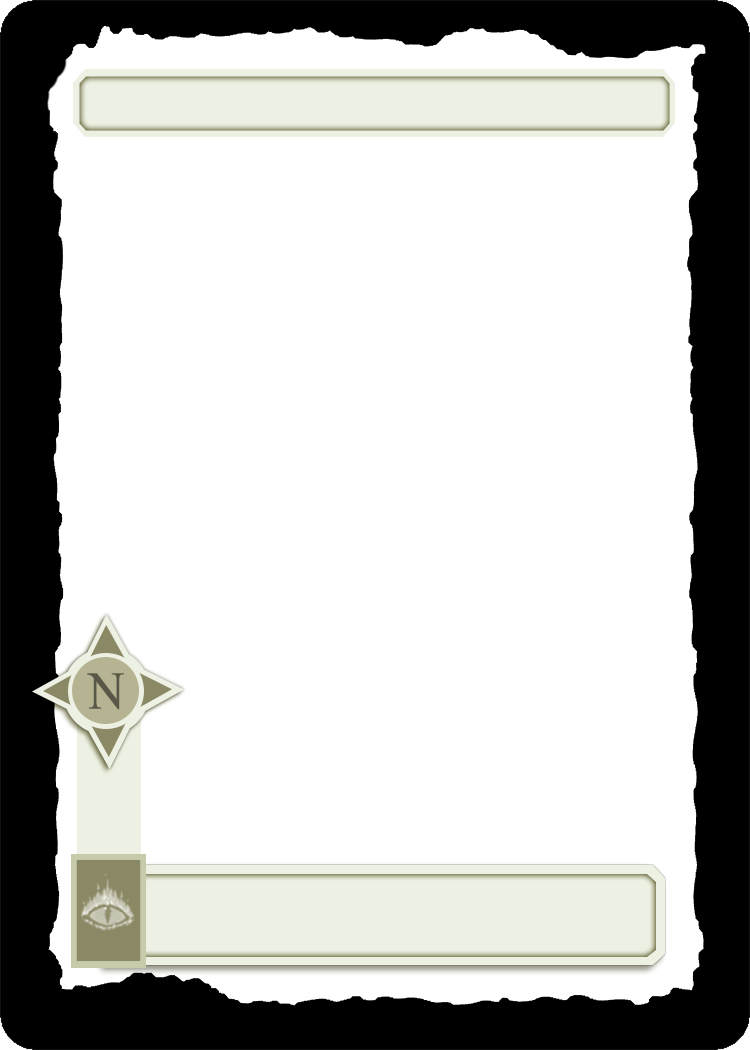
<style>
.page{position:relative;width:750px;height:1050px;background:#ffffff}
.page>*{position:absolute;margin:0}
.t1{font:53px "TimesNewRoman180";color:#595848;font-weight:bold;scale:0.94 1}
</style>
<div class="page">
<p class="t1" style="left:87px;top:673px;width:37px;height:37px">N</p>
</div>
